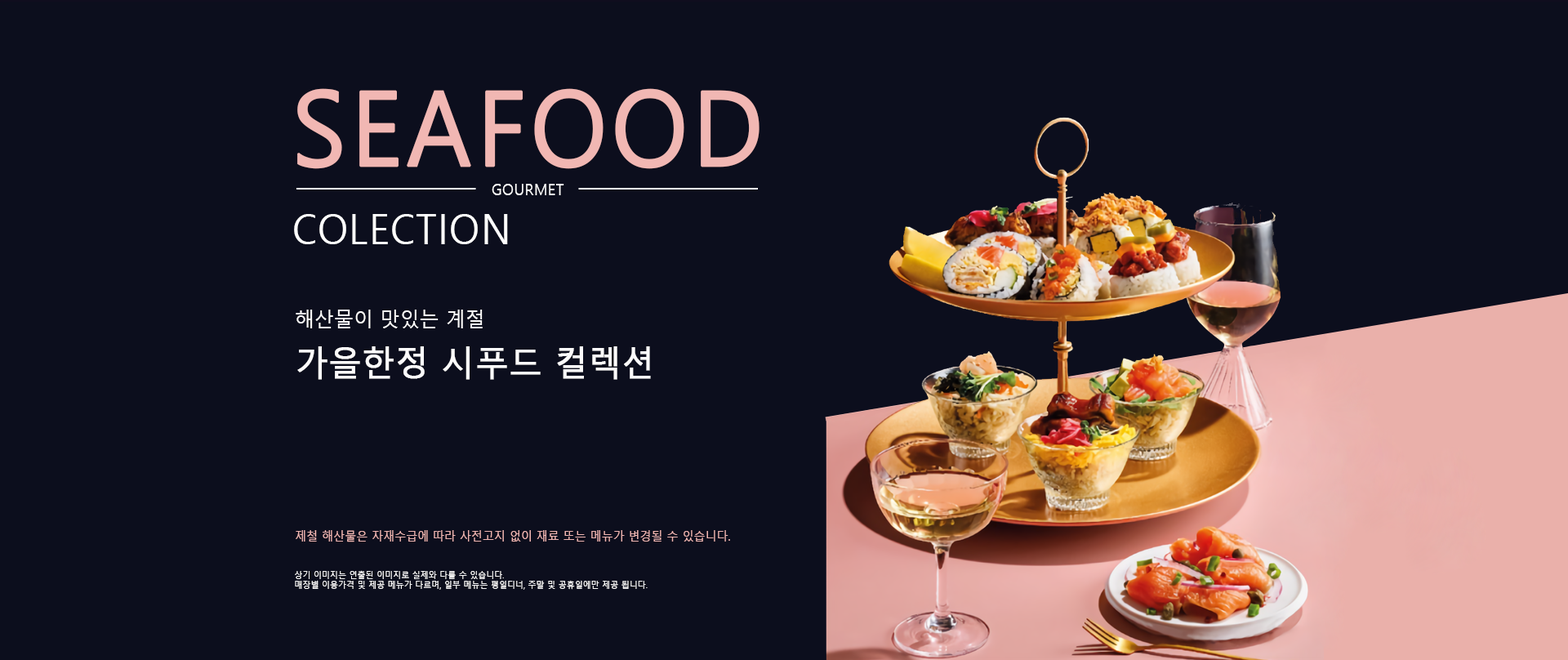
<style>
.page{position:relative;width:1568px;height:660px;background:#0c0e1d}
.page>*{position:absolute;margin:0}
.t1{font:41.2px/49px "MalgunGothic";letter-spacing:0.025em;color:#ffffff;scale:0.95 1}
.t2{font:102.9px/69.2px "MalgunGothic";letter-spacing:0.025em;color:#f1b7b3;font-weight:bold;scale:0.95 1}
.t3{font:15.4px/29.4px "MalgunGothic";letter-spacing:0.025em;color:#ffffff;scale:0.95 1}
.t4{font:34.3px/49px "MalgunGothic";color:#fcfbfb;font-weight:bold;scale:0.95 1}
.t5{font:20.6px/49px "MalgunGothic";color:#fcfbfb;scale:0.95 1}
.t6{font:12px "MalgunGothic";color:#f0b6b2;scale:0.95 1}
.t7{font:8.6px "MalgunGothic";color:#fcfbfb;scale:0.95 1}
</style>
<div class="page">
<p class="t1" style="left:294px;top:88px;width:466px;height:156px"><span class="t2">SEAFOOD<br></span><span class="t3">                 GOURMET<br></span>COLECTION</p>
<p class="t4" style="left:296px;top:310px;width:355px;height:70px"><span class="t5">해산물이 맛있는 계절<br></span>가을한정 시푸드 컬렉션</p>
<p class="t6" style="left:296px;top:530px;width:434px;height:12px">제철 해산물은 자재수급에 따라 사전고지 없이 재료 또는 메뉴가 변경될 수 있습니다.</p>
<p class="t7" style="left:295px;top:570px;width:353px;height:20px">상기 이미지는 연출된 이미지로 실제와 다를 수 있습니다.<br>매장별 이용가격 및 제공 메뉴가 다르며, 일부 메뉴는 평일디너, 주말 및 공휴일에만 제공 됩니다.</p>
</div>
